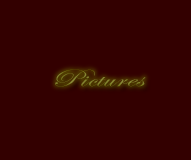
<style>
.page{position:relative;width:191px;height:160px;background:#330000}
.page>*{position:absolute;margin:0}
.t1{font:25.2px "EdwardianScriptITC";letter-spacing:0.025em;color:#838330;scale:1.43 1}
</style>
<div class="page">
<p class="t1" style="left:55px;top:69px;width:91px;height:18px">Pictures</p>
</div>
